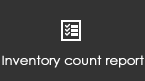
<style>
.page{position:relative;width:145px;height:81px;background:#333333}
.page>*{position:absolute;margin:0}
.t1{font:12.5px "CenturyGothic";color:#ffffff;font-weight:bold}
</style>
<div class="page">
<p class="t1" style="left:2px;top:55px;width:142px;height:13px">Inventory count report</p>
</div>
